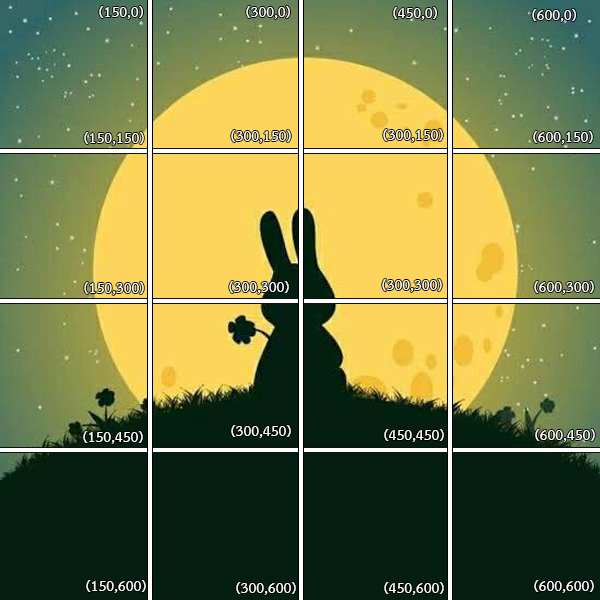
<style>
.page{position:relative;width:600px;height:600px;background:#041e11}
.page>*{position:absolute;margin:0}
.t1{font:20.8px "THSarabunNew-Bold";color:#ffffff}
</style>
<div class="page">
<p class="t1" style="left:99px;top:6px;width:44px;height:13px">(150,0)</p>
<p class="t1" style="left:246px;top:6px;width:44px;height:13px">(300,0)</p>
<p class="t1" style="left:393px;top:7px;width:44px;height:13px">(450,0)</p>
<p class="t1" style="left:532px;top:9px;width:44px;height:13px">(600,0)</p>
<p class="t1" style="left:84px;top:132px;width:60px;height:13px">(150,150)</p>
<p class="t1" style="left:231px;top:130px;width:60px;height:13px">(300,150)</p>
<p class="t1" style="left:383px;top:129px;width:60px;height:13px">(300,150)</p>
<p class="t1" style="left:533px;top:131px;width:60px;height:13px">(600,150)</p>
<p class="t1" style="left:229px;top:281px;width:60px;height:13px">(300,300)</p>
<p class="t1" style="left:382px;top:279px;width:60px;height:13px">(300,300)</p>
<p class="t1" style="left:534px;top:281px;width:60px;height:13px">(600,300)</p>
<p class="t1" style="left:84px;top:282px;width:60px;height:13px">(150,300)</p>
<p class="t1" style="left:231px;top:425px;width:60px;height:13px">(300,450)</p>
<p class="t1" style="left:83px;top:431px;width:60px;height:13px">(150,450)</p>
<p class="t1" style="left:384px;top:429px;width:60px;height:13px">(450,450)</p>
<p class="t1" style="left:535px;top:429px;width:60px;height:13px">(600,450)</p>
<p class="t1" style="left:86px;top:580px;width:60px;height:13px">(150,600)</p>
<p class="t1" style="left:236px;top:582px;width:60px;height:13px">(300,600)</p>
<p class="t1" style="left:384px;top:582px;width:60px;height:13px">(450,600)</p>
<p class="t1" style="left:534px;top:580px;width:60px;height:13px">(600,600)</p>
</div>
